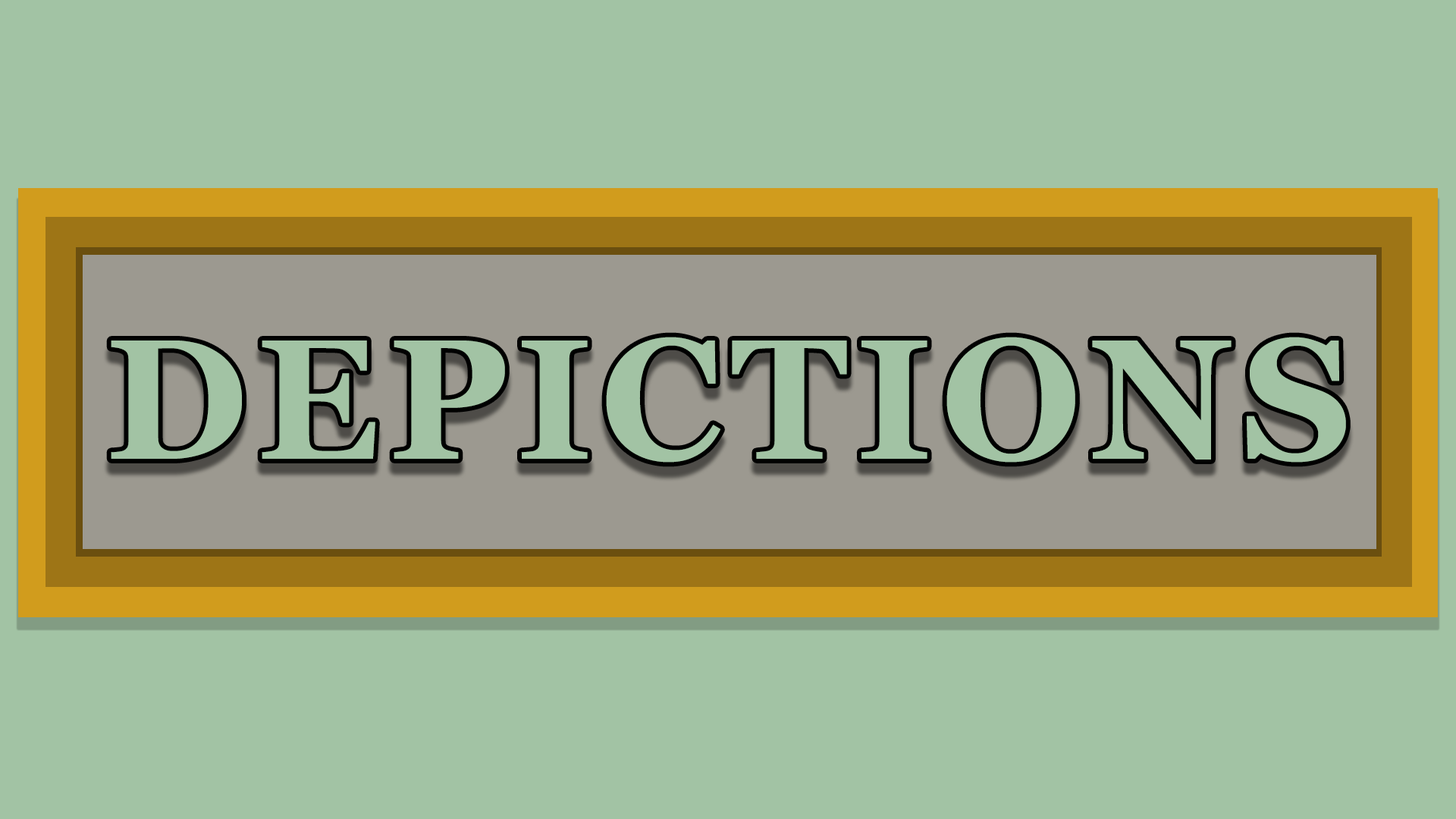
<style>
.page{position:relative;width:1456px;height:819px;background:#a2c3a4}
.page>*{position:absolute;margin:0}
.t1{font:170.6px "Georgia-Bold";letter-spacing:0.05em;color:#a2c3a4}
</style>
<div class="page">
<p class="t1" style="left:111px;top:337px;width:1235px;height:126px">DEPICTIONS</p>
</div>
